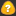
<style>
.page{position:relative;width:16px;height:16px}
.page>*{position:absolute;margin:0}
.t1{font:10px "Arial-Black";color:#ffffff}
</style>
<div class="page">
<p class="t1" style="left:5px;top:4px;width:6px;height:8px">?</p>
</div>
